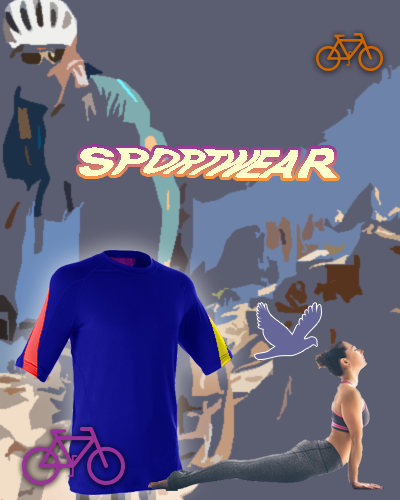
<style>
.page{position:relative;width:400px;height:500px;background:#5b5d70}
.page>*{position:absolute;margin:0}
.t1{font:40px "Arial-BoldMT";color:#ffffcc}
</style>
<div class="page">
<p class="t1" style="left:79px;top:147px;width:258px;height:31px">SPORTWEAR</p>
</div>
